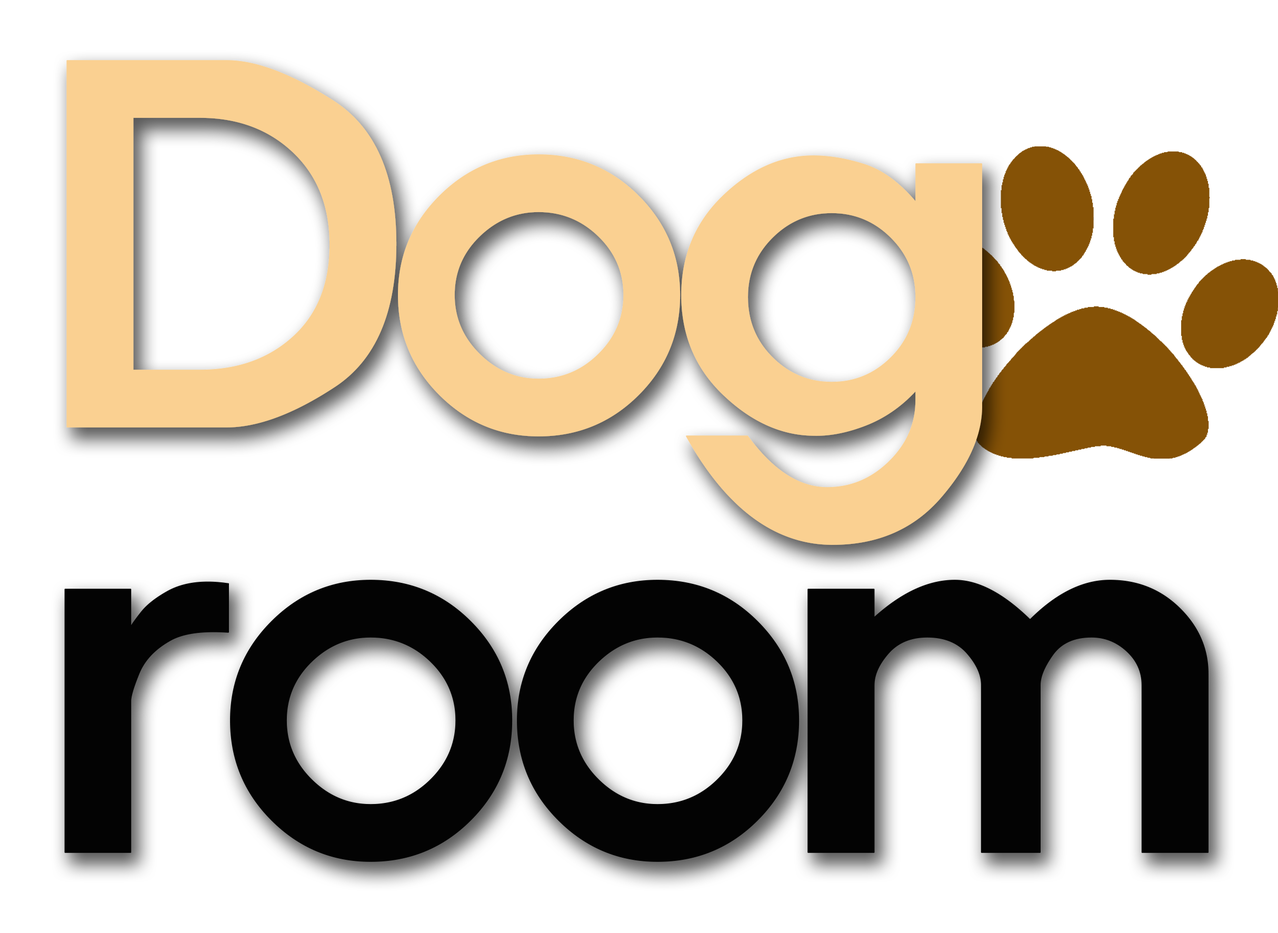
<style>
.page{position:relative;width:1278px;height:933px;background:#ffffff}
.page>*{position:absolute;margin:0}
.t1{font:469.3px "ExpoM-HM";letter-spacing:-0.075em;color:#fad091;font-weight:bold}
.t2{font:469.3px "ExpoM-HM";letter-spacing:-0.075em;color:#030303;font-weight:bold}
</style>
<div class="page">
<p class="t1" style="left:66px;top:60px;width:916px;height:485px">Dog</p>
<p class="t2" style="left:64px;top:580px;width:1145px;height:282px">room</p>
</div>
